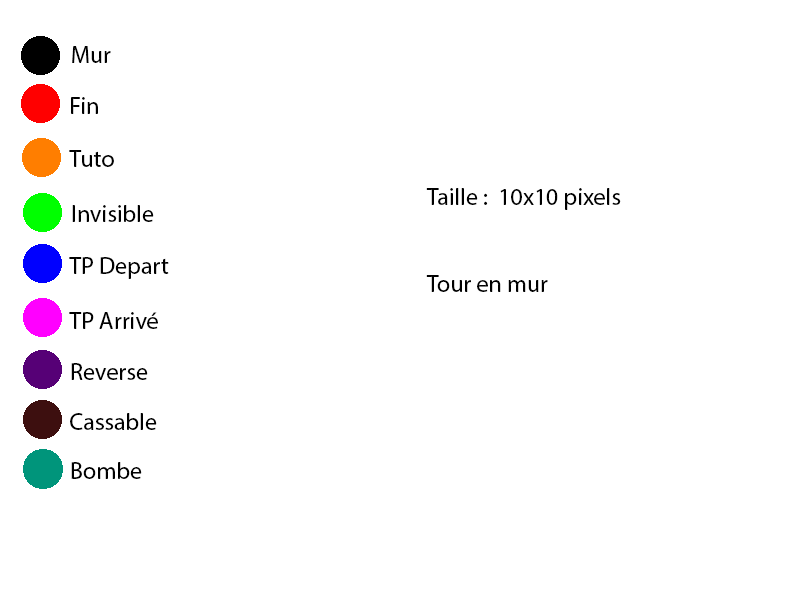
<style>
.page{position:relative;width:800px;height:600px;background:#ffffff}
.page>*{position:absolute;margin:0}
.t1{font:24px "MyriadPro-Regular";color:#000000}
.t2{font:24px "MyriadPro-Regular";color:#010101}
</style>
<div class="page">
<p class="t1" style="left:72px;top:46px;width:39px;height:17px">Mur</p>
<p class="t1" style="left:71px;top:97px;width:27px;height:17px">Fin</p>
<p class="t1" style="left:69px;top:150px;width:45px;height:17px">Tuto</p>
<p class="t1" style="left:426px;top:188px;width:195px;height:104px">Taille :  10x10 pixels<br><br><br>Tour en mur</p>
<p class="t1" style="left:72px;top:205px;width:82px;height:17px">Invisible</p>
<p class="t1" style="left:69px;top:257px;width:100px;height:22px">TP Depart</p>
<p class="t1" style="left:69px;top:312px;width:89px;height:17px">TP Arrivé</p>
<p class="t1" style="left:71px;top:363px;width:77px;height:17px">Reverse</p>
<p class="t1" style="left:70px;top:413px;width:87px;height:17px">Cassable</p>
<p class="t2" style="left:71px;top:462px;width:71px;height:17px">Bombe</p>
</div>
